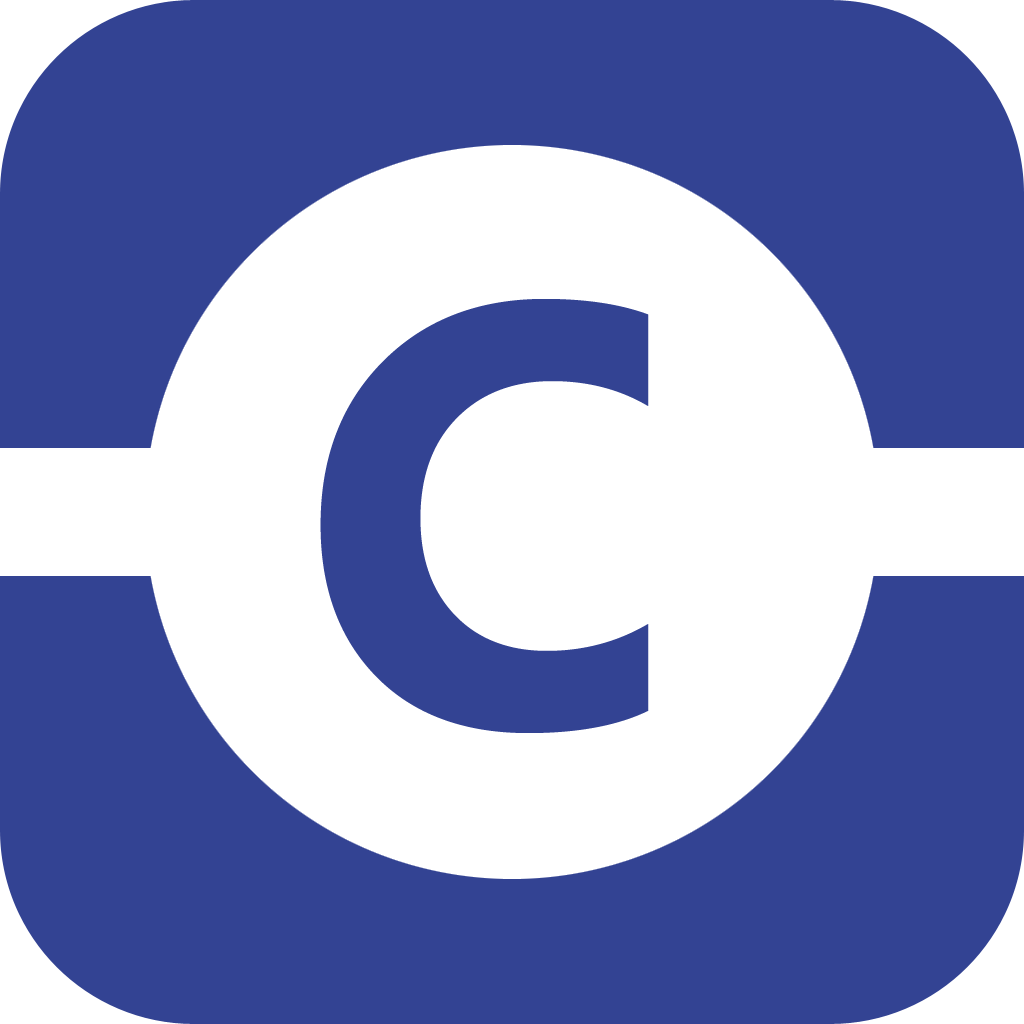
<style>
.page{position:relative;width:1024px;height:1024px;background:#334393}
.page>*{position:absolute;margin:0}
.t1{font:600px "SegoeUI-Bold";color:#334393}
</style>
<div class="page">
<p class="t1" style="left:320px;top:299px;width:329px;height:434px">C</p>
</div>
